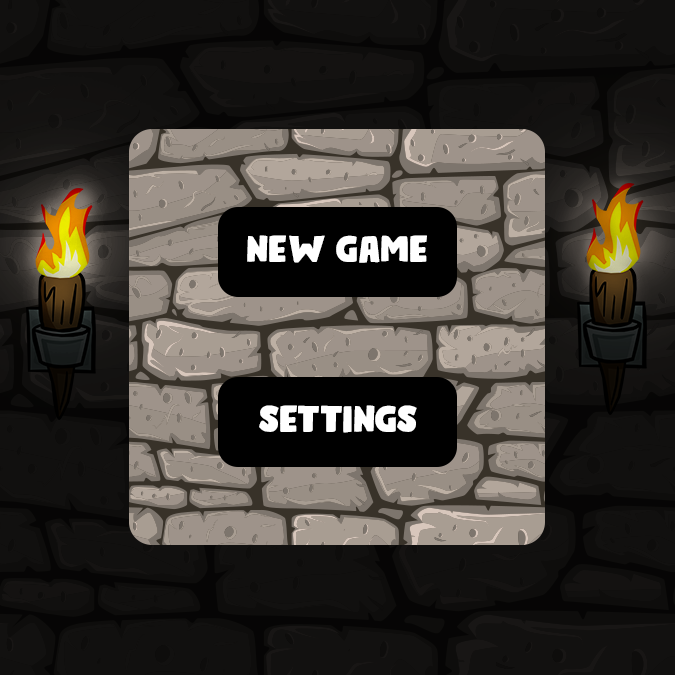
<style>
.page{position:relative;width:675px;height:675px}
.page>*{position:absolute;margin:0}
.t1{font:37.5px "BumperStickerDEMO-Regular";color:#ffffff}
</style>
<div class="page">
<p class="t1" style="left:247px;top:235px;width:180px;height:28px">NEW GAME</p>
<p class="t1" style="left:259px;top:405px;width:158px;height:28px">SETTINGS</p>
</div>
